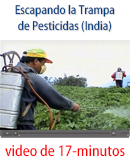
<style>
.page{position:relative;width:130px;height:159px;background:#ffffff}
.page>*{position:absolute;margin:0}
.t1{font:13px "MyriadWebPro-Condensed";color:#09407e}
.t2{font:16px "MyriadWebPro-Condensed";color:#fd0107}
</style>
<div class="page">
<p class="t1" style="left:15px;top:4px;width:100px;height:28px;text-align:center">Escapando la Trampa<br>de Pesticidas (India)</p>
<p class="t2" style="left:5px;top:144px;width:120px;height:13px">video de 17-minutos</p>
</div>
